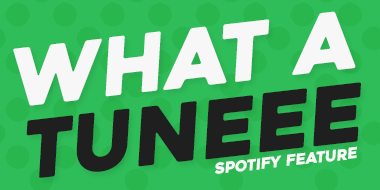
<style>
.page{position:relative;width:380px;height:190px;background:#2ebd59}
.page>*{position:absolute;margin:0}
.t1{font:80px "Heavitas";color:#f7f7f7;font-style:italic}
.t2{font:80px "Heavitas";color:#1f1f1f;font-style:italic}
.t3{font:15px "Heavitas";color:#f7f7f7;font-style:italic}
</style>
<div class="page">
<p class="t1" style="left:13px;top:11px;width:343px;height:95px;rotate:-7deg">WHAT A</p>
<p class="t2" style="left:26px;top:82px;width:335px;height:96px;rotate:-7deg">TUNEEE</p>
<p class="t3" style="left:215px;top:146px;width:142px;height:28px;rotate:-6deg">SPOTIFY FEATURE</p>
</div>
